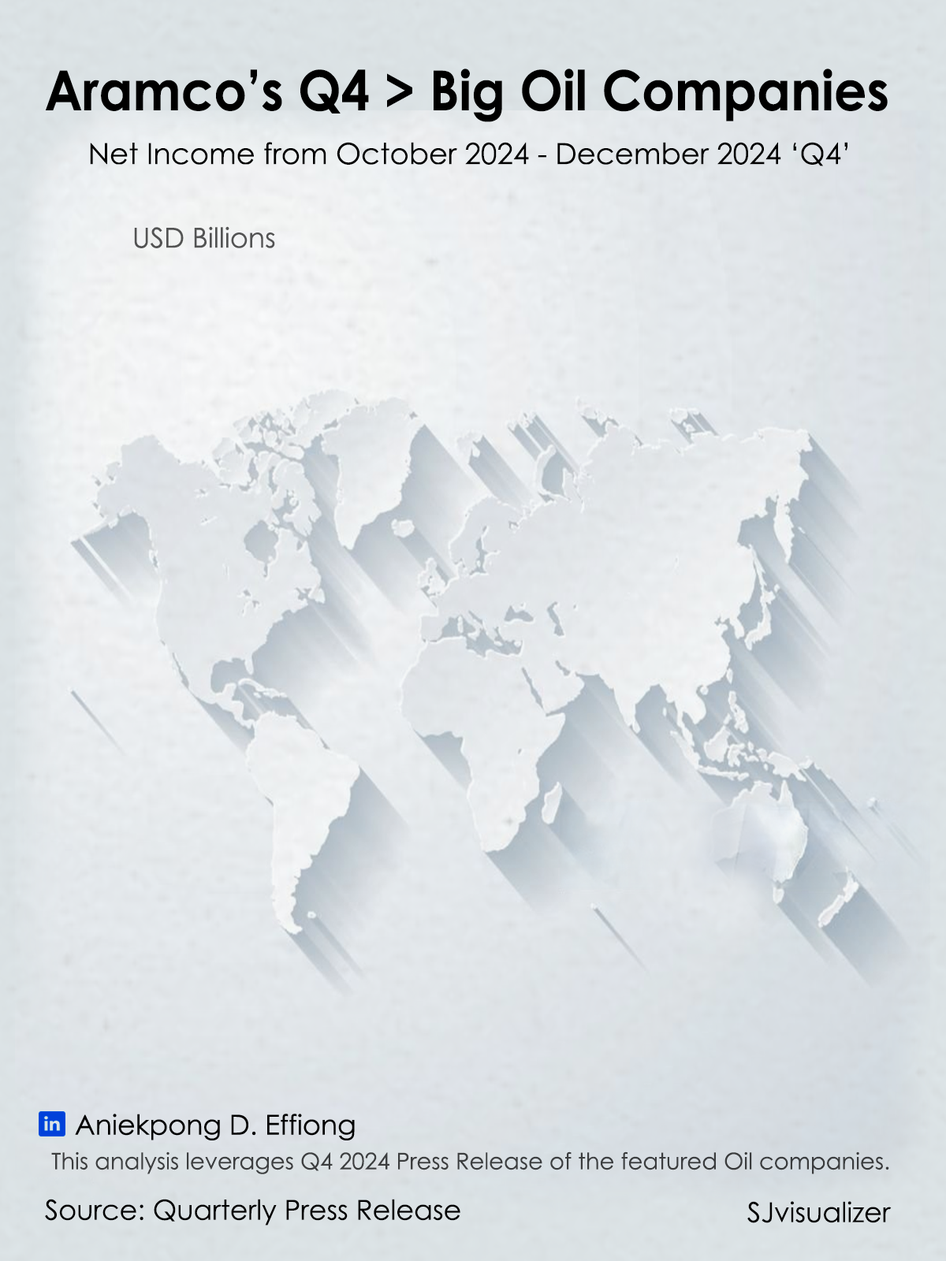
<style>
.page{position:relative;width:946px;height:1261px}
.page>*{position:absolute;margin:0}
.t1{font:55.2px "CenturyGothic-Bold";color:#000000;scale:0.93 1}
.t2{font:29.2px "CenturyGothic";color:#000000}
.t3{font:27.6px "CenturyGothic";color:#535354}
.t4{font:27.6px "CenturyGothic";color:#000000}
.t5{font:22.9px "CenturyGothic";color:#3b3d3e}
</style>
<div class="page">
<p class="t1" style="left:46px;top:69px;width:841px;height:53px">Aramco’s Q4 &gt; Big Oil Companies</p>
<p class="t2" style="left:90px;top:142px;width:757px;height:24px">Net Income from October 2024 - December 2024 ‘Q4’</p>
<p class="t3" style="left:134px;top:226px;width:141px;height:22px">USD Billions</p>
<p class="t4" style="left:75px;top:1114px;width:280px;height:26px">Aniekpong D. Effiong</p>
<p class="t4" style="left:75px;top:1114px;width:280px;height:26px">Aniekpong D. Effiong</p>
<p class="t5" style="left:51px;top:1151px;width:838px;height:23px">This analysis leverages Q4 2024 Press Release of the featured Oil companies.</p>
<p class="t4" style="left:45px;top:1199px;width:415px;height:26px">Source: Quarterly Press Release</p>
<p class="t4" style="left:747px;top:1201px;width:144px;height:22px">SJvisualizer</p>
</div>
